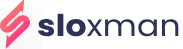
<style>
.page{position:relative;width:183px;height:49px;background:#ffffff}
.page>*{position:absolute;margin:0}
.t1{font:30px "Poppins-Regular";color:#2d3259;scale:1.11 1}
.t2{font:30px "Poppins-Bold";color:#2d3259;scale:1.11 1}
</style>
<div class="page">
<p class="t1" style="left:38px;top:13px;width:141px;height:24px"><span class="t2">slo</span>xman</p>
</div>
